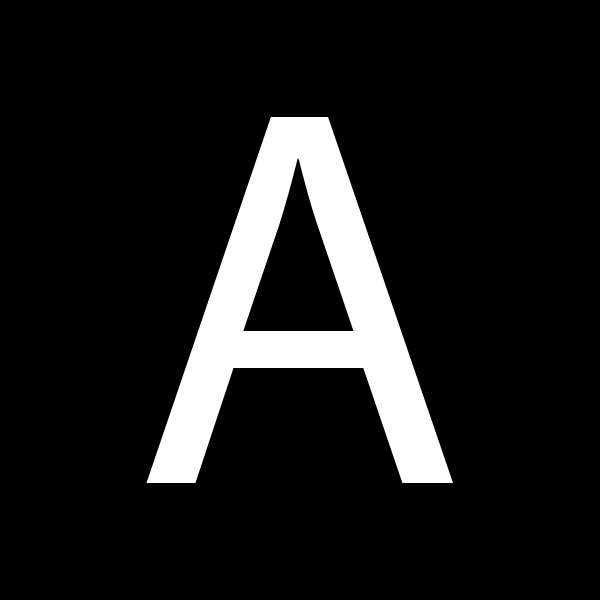
<style>
.page{position:relative;width:600px;height:600px;background:#000000}
.page>*{position:absolute;margin:0}
.t1{font:543.6px "MyriadPro-Regular";color:#ffffff}
</style>
<div class="page">
<p class="t1" style="left:146px;top:117px;width:307px;height:366px">A</p>
</div>
